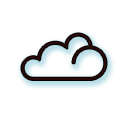
<style>
.page{position:relative;width:128px;height:128px;background:#ffffff}
.page>*{position:absolute;margin:0}
.t1{font:96px "ArialUnicodeMS";color:#290b0b}
</style>
<div class="page">
<p class="t1" style="left:21px;top:33px;width:86px;height:47px">☁︎</p>
</div>
